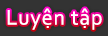
<style>
.page{position:relative;width:108px;height:36px;background:#333333}
.page>*{position:absolute;margin:0}
.t1{font:22px "Corbel";letter-spacing:0.035em;color:#ffffff}
</style>
<div class="page">
<p class="t1" style="left:7px;top:8px;width:95px;height:22px">Luyện tập</p>
</div>
